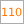
<style>
.page{position:relative;width:24px;height:24px;background:#ffffff}
.page>*{position:absolute;margin:0}
.t1{font:11.3px "DejaVuSans";color:#ff7904}
</style>
<div class="page">
<p class="t1" style="left:2px;top:7px;width:20px;height:10px">110</p>
</div>
